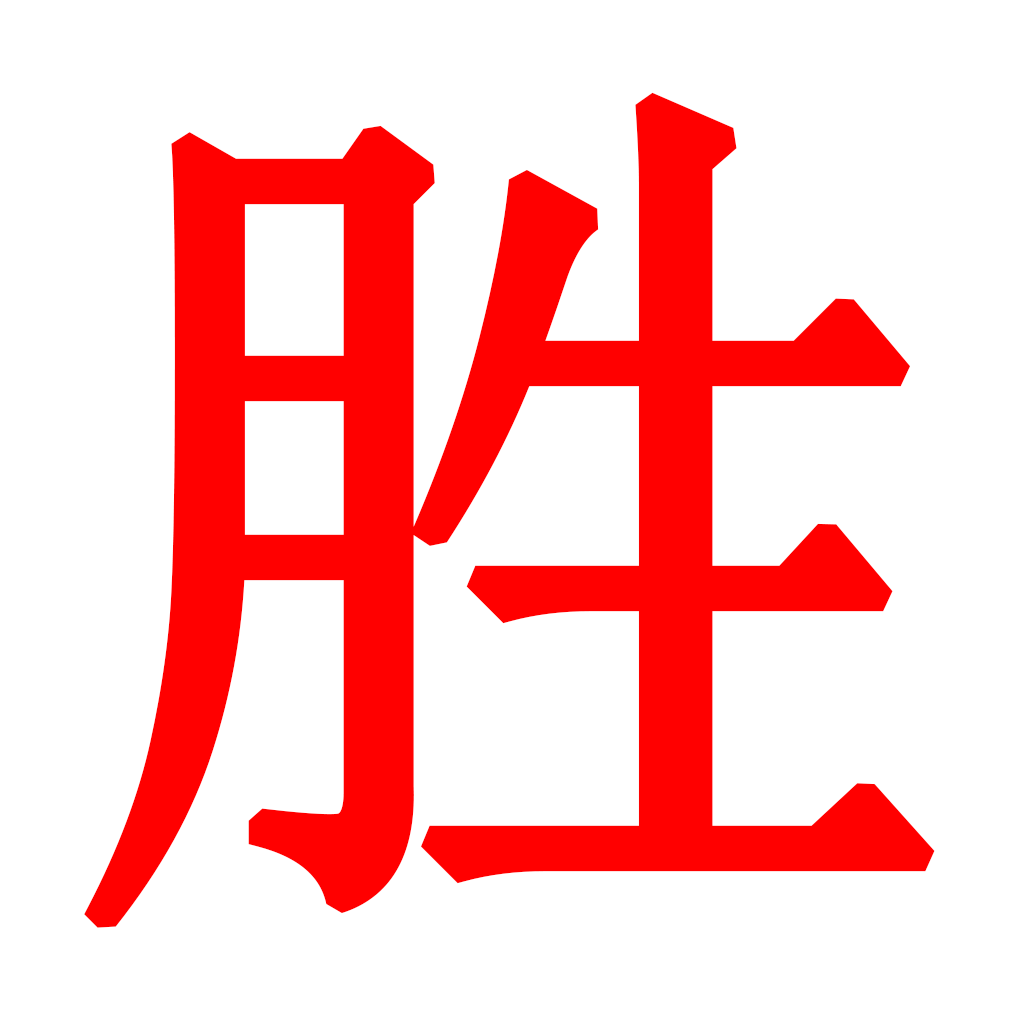
<style>
.page{position:relative;width:1024px;height:1024px;background:#ffffff}
.page>*{position:absolute;margin:0}
.t1{font:900px "SimSun";color:#ff0000;font-weight:bold}
</style>
<div class="page">
<p class="t1" style="left:84px;top:92px;width:851px;height:836px">胜</p>
</div>
